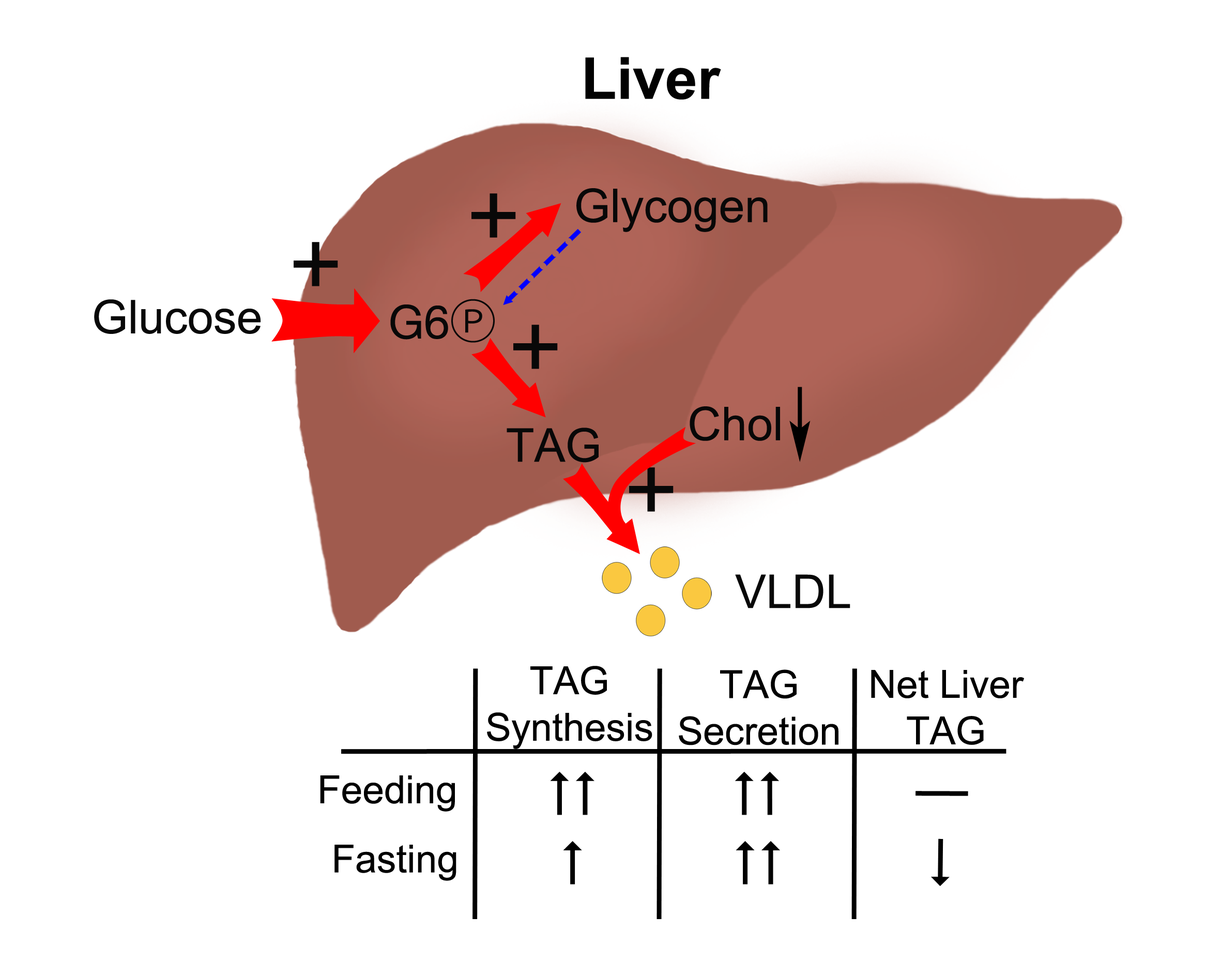
<style>
.page{position:relative;width:1221px;height:977px;background:#ffffff}
.page>*{position:absolute;margin:0}
.t1{font:58.1px "Arial-BoldMT";color:#020202}
.t2{font:86.1px "Helvetica";color:#080808}
.t3{font:46.5px "ArialMT";color:#080808}
.t4{font:46.5px "HelveticaNeue";color:#080808}
.t5{font:46.5px "KozGoPr6N-Regular";color:#080808}
.t6{font:38.8px "ArialMT";color:#000000}
</style>
<div class="page">
<p class="t1" style="left:585px;top:57px;width:136px;height:43px">Liver</p>
<p class="t2" style="left:471px;top:193px;width:45px;height:45px">+</p>
<p class="t3" style="left:576px;top:188px;width:191px;height:44px">Glycogen</p>
<p class="t2" style="left:294px;top:242px;width:44px;height:44px">+</p>
<p class="t3" style="left:94px;top:299px;width:167px;height:35px">Glucose</p>
<p class="t4" style="left:390px;top:299px;width:105px;height:44px">G6<span class="t5">Ⓟ</span></p>
<p class="t2" style="left:513px;top:325px;width:45px;height:44px">+</p>
<p class="t3" style="left:689px;top:406px;width:91px;height:35px">Chol</p>
<p class="t3" style="left:506px;top:427px;width:92px;height:36px">TAG</p>
<p class="t2" style="left:629px;top:467px;width:44px;height:45px">+</p>
<p class="t3" style="left:735px;top:574px;width:115px;height:34px">VLDL</p>
<p class="t6" style="left:487px;top:666px;width:165px;height:83px;text-align:center">TAG<br>Synthesis</p>
<p class="t6" style="left:679px;top:669px;width:159px;height:76px;text-align:center">TAG<br>Secretion</p>
<p class="t6" style="left:871px;top:670px;width:153px;height:75px;text-align:center">Net Liver<br>TAG</p>
<p class="t6" style="left:320px;top:775px;width:135px;height:36px">Feeding</p>
<p class="t6" style="left:334px;top:844px;width:122px;height:37px">Fasting</p>
</div>
